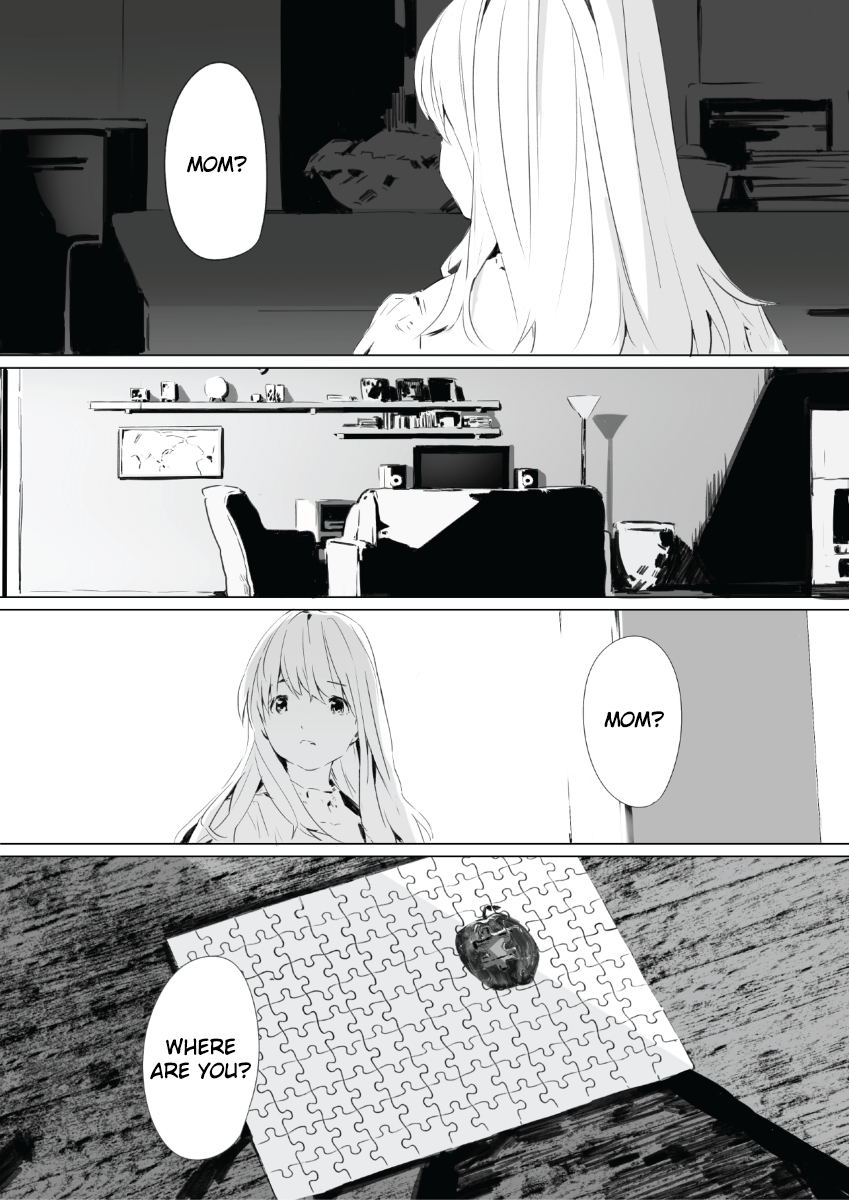
<style>
.page{position:relative;width:849px;height:1200px;background:#ffffff}
.page>*{position:absolute;margin:0}
.t1{font:20px "CCWildWordsRoman";color:#000000}
</style>
<div class="page">
<p class="t1" style="left:187px;top:156px;width:60px;height:17px">mom?</p>
<p class="t1" style="left:604px;top:711px;width:60px;height:17px">Mom?</p>
<p class="t1" style="left:150px;top:1037px;width:101px;height:43px;text-align:center">Where<br>are you?</p>
</div>
